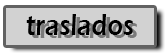
<style>
.page{position:relative;width:167px;height:56px;background:#d2d2d2}
.page>*{position:absolute;margin:0}
.t1{font:31.4px "ErasITC-Demi";color:#000000;scale:0.8 1}
</style>
<div class="page">
<p class="t1" style="left:26px;top:14px;width:107px;height:21px">traslados</p>
</div>
